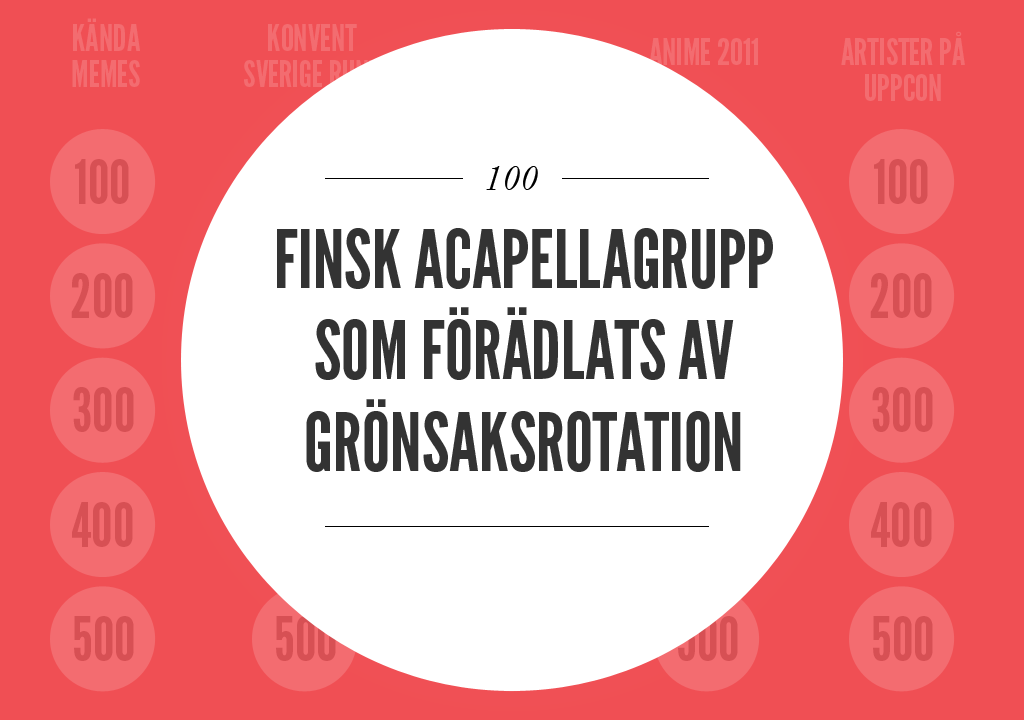
<style>
.page{position:relative;width:1024px;height:720px;background:#ffffff}
.page>*{position:absolute;margin:0}
.t1{font:36px/36px "LeagueGothic";color:#f36c70}
.t2{font:36px "LeagueGothic";color:#f36c70}
.t3{font:59.9px "LeagueGothic";color:#d75054}
.t4{font:36px "Baskerville-Italic";color:#000000}
.t5{font:79.8px/91.7px "LeagueGothic";color:#333333}
</style>
<div class="page">
<p class="t1" style="left:72px;top:18px;width:68px;height:69px;text-align:center">KÄNDA<br>MEMES</p>
<p class="t1" style="left:244px;top:24px;width:137px;height:63px;text-align:center">KONVENT<br>SVERIGE RUNT</p>
<p class="t2" style="left:649px;top:38px;width:109px;height:27px">ANIME 2011</p>
<p class="t1" style="left:841px;top:31px;width:124px;height:70px;text-align:center">ARTISTER PÅ<br>UPPCON</p>
<p class="t3" style="left:75px;top:159px;width:54px;height:45px">100</p>
<p class="t3" style="left:874px;top:159px;width:54px;height:45px">100</p>
<p class="t4" style="left:486px;top:166px;width:52px;height:24px">100</p>
<p class="t5" style="left:277px;top:228px;width:496px;height:244px;text-align:center">FINSK ACAPELLAGRUPP SOM FÖRÄDLATS AV GRÖNSAKSROTATION</p>
<p class="t3" style="left:71px;top:273px;width:62px;height:45px">200</p>
<p class="t3" style="left:870px;top:273px;width:62px;height:45px">200</p>
<p class="t3" style="left:73px;top:387px;width:61px;height:45px">300</p>
<p class="t3" style="left:872px;top:387px;width:61px;height:45px">300</p>
<p class="t3" style="left:72px;top:502px;width:61px;height:45px">400</p>
<p class="t3" style="left:871px;top:502px;width:61px;height:45px">400</p>
<p class="t3" style="left:74px;top:616px;width:60px;height:45px">500</p>
<p class="t3" style="left:276px;top:616px;width:60px;height:45px">500</p>
<p class="t3" style="left:678px;top:616px;width:60px;height:45px">500</p>
<p class="t3" style="left:873px;top:616px;width:60px;height:45px">500</p>
</div>
